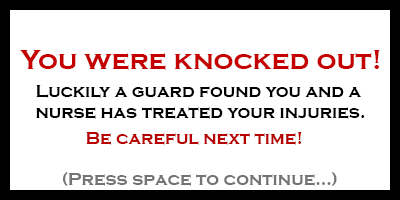
<style>
.page{position:relative;width:400px;height:200px;background:#ffffff}
.page>*{position:absolute;margin:0}
.t1{font:28px "CopperplateGothic-Bold";color:#c50000}
.t2{font:18px "CopperplateGothic-Bold";color:#000000}
.t3{font:18px "CopperplateGothic-Bold";color:#b70202}
.t4{font:18px "CopperplateGothic-Bold";color:#747474}
</style>
<div class="page">
<p class="t1" style="left:20px;top:50px;width:360px;height:20px">You were knocked out!</p>
<p class="t2" style="left:36px;top:85px;width:329px;height:34px">Luckily a guard found you and a <br>nurse has treated your injuries.</p>
<p class="t3" style="left:86px;top:132px;width:216px;height:13px">Be careful next time!</p>
<p class="t4" style="left:62px;top:172px;width:275px;height:14px">(Press space to continue...)</p>
</div>
